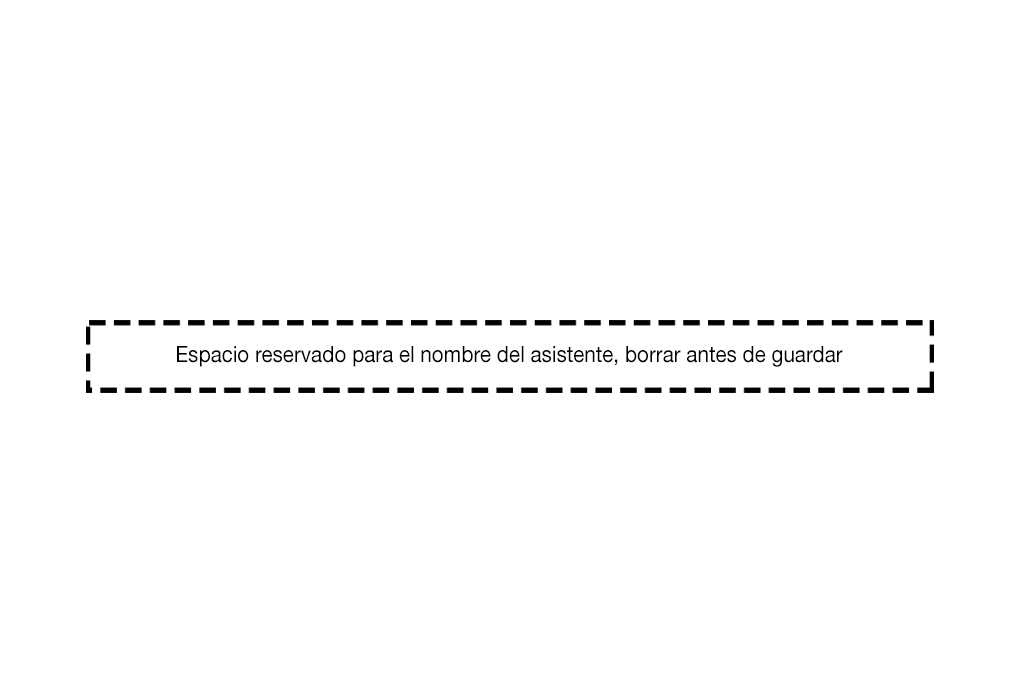
<style>
.page{position:relative;width:1015px;height:700px;background:#ffffff}
.page>*{position:absolute;margin:0}
.t1{font:22.4px "HelveticaNeue";color:#000000;scale:0.92 1}
</style>
<div class="page">
<p class="t1" style="left:177px;top:346px;width:666px;height:21px">Espacio reservado para el nombre del asistente, borrar antes de guardar</p>
</div>
